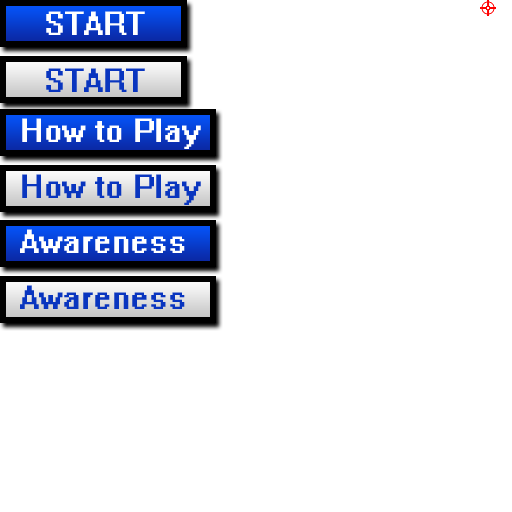
<style>
.page{position:relative;width:512px;height:512px;background:#ffffff}
.page>*{position:absolute;margin:0}
.t1{font:30px "System";color:#ffffff}
.t2{font:30px "System";color:#0935bf}
</style>
<div class="page">
<p class="t1" style="left:46px;top:11px;width:99px;height:24px">START</p>
<p class="t2" style="left:46px;top:68px;width:99px;height:24px">START</p>
<p class="t1" style="left:22px;top:118px;width:179px;height:31px">How to Play</p>
<p class="t2" style="left:22px;top:174px;width:179px;height:31px">How to Play</p>
<p class="t1" style="left:20px;top:229px;width:165px;height:24px">Awareness</p>
<p class="t2" style="left:20px;top:285px;width:165px;height:24px">Awareness</p>
</div>
